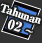
<style>
.page{position:relative;width:42px;height:43px;background:#333333}
.page>*{position:absolute;margin:0}
.t1{font:11px/14px "RyuminPro-ExBold";letter-spacing:-0.08em;color:#ffffff;font-weight:bold}
.t2{font:13px/14px "RyuminPro-ExBold";color:#ffffff;font-weight:bold}
.t3{font:13px/14px "WineArial";color:#ffffff;font-weight:bold}
</style>
<div class="page">
<p class="t1" style="left:0px;top:3px;width:41px;height:30px;text-align:center;rotate:19deg">Tahunan<br><span class="t2">  02 </span><span class="t3">~</span></p>
</div>
